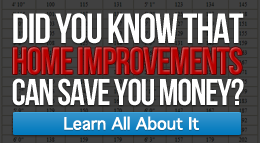
<style>
.page{position:relative;width:260px;height:143px;background:#404040}
.page>*{position:absolute;margin:0}
.t1{font:37px/31px "BebasNeue";letter-spacing:-0.035em;color:#ffffff}
.t2{font:42px/31px "BebasNeue";letter-spacing:-0.03em;color:#ffffff}
.t3{font:38px "BebasNeue";letter-spacing:-0.034em;color:#b70000}
.t4{font:16px "Geneva";letter-spacing:-0.03em;color:#ffffff;font-weight:bold}
</style>
<div class="page">
<p class="t1" style="left:12px;top:13px;width:232px;height:93px"><span class="t2">Did You Know That <br><br></span>Can Save You Money?</p>
<p class="t3" style="left:13px;top:47px;width:229px;height:28px">Home Improvements</p>
<p class="t4" style="left:64px;top:116px;width:135px;height:14px">Learn All About It</p>
</div>
